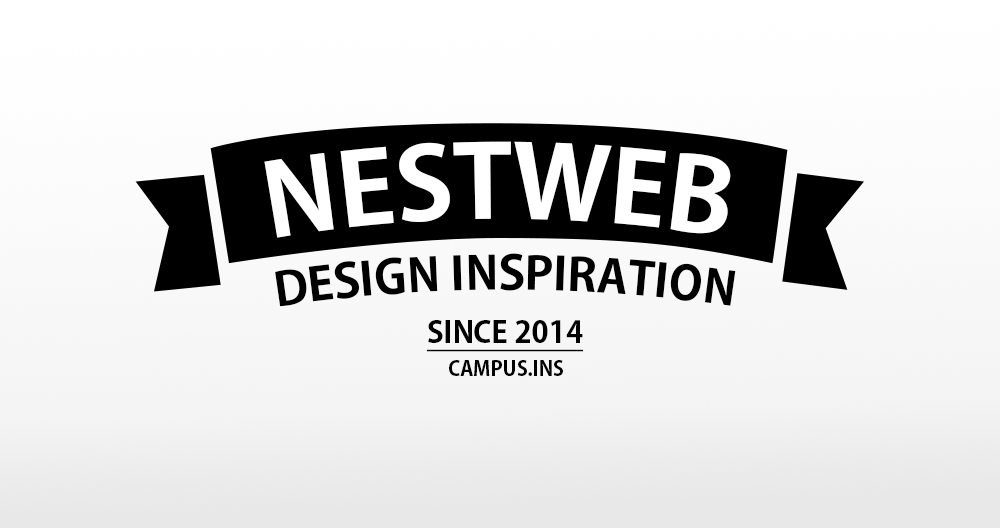
<style>
.page{position:relative;width:1000px;height:528px}
.page>*{position:absolute;margin:0}
.t1{font:100px "KozGoPr6N-Bold";color:#ffffff}
.t2{font:46px "KozGoPr6N-Bold";color:#000000}
.t3{font:30px "KozGoPr6N-Bold";color:#000000;text-decoration:underline}
.t4{font:20px "KozGoPr6N-Bold";color:#000000}
</style>
<div class="page">
<p class="t1" style="left:264px;top:141px;width:467px;height:97px">NESTWEB</p>
<p class="t2" style="left:275px;top:253px;width:461px;height:54px">DESIGN INSPIRATION</p>
<p class="t3" style="left:426px;top:320px;width:158px;height:32px">SINCE 2014</p>
<p class="t4" style="left:449px;top:360px;width:114px;height:16px">CAMPUS.INS</p>
</div>
